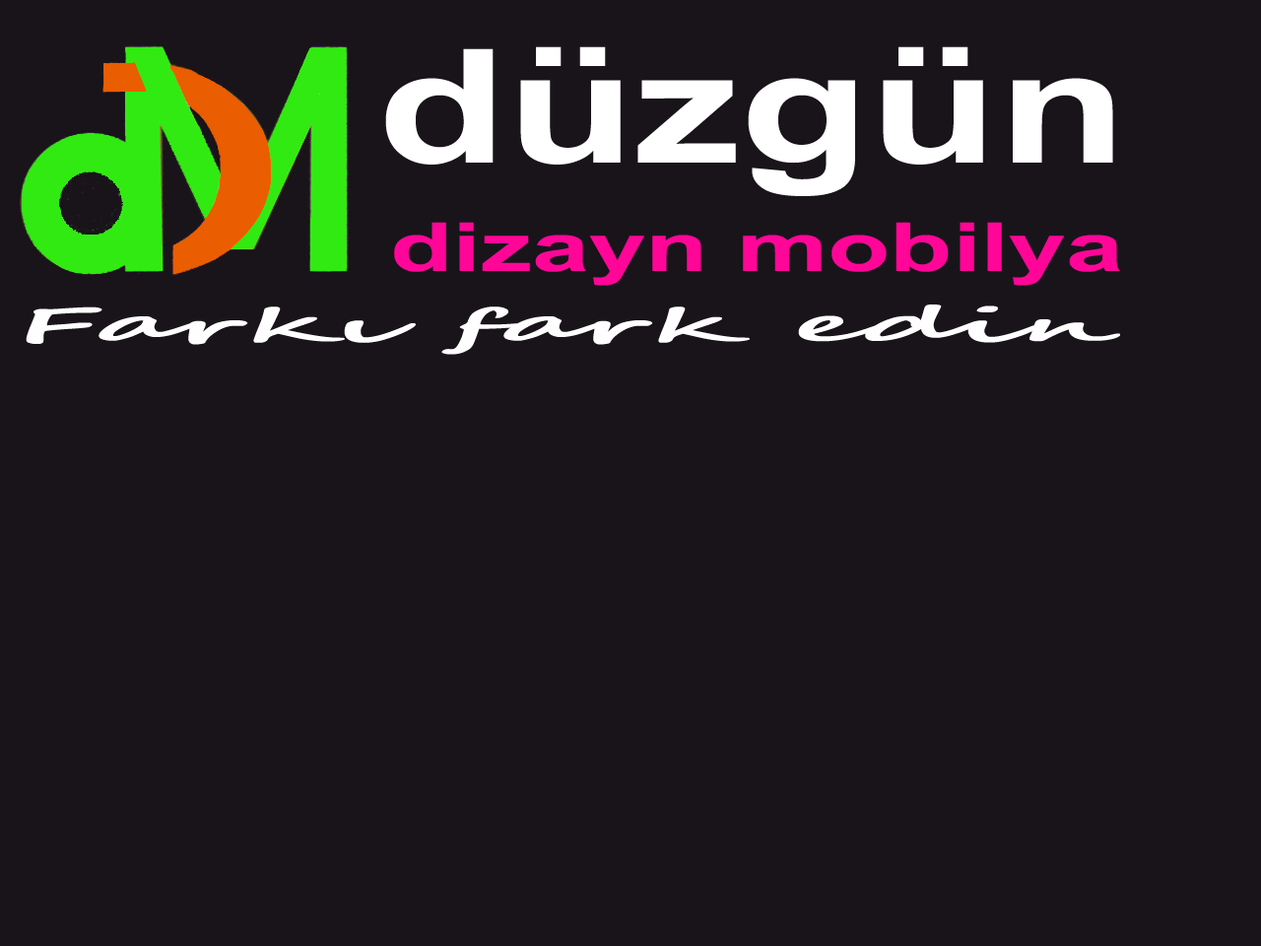
<style>
.page{position:relative;width:1261px;height:946px;background:#19141a}
.page>*{position:absolute;margin:0}
.t1{font:221.5px "Utsaah-Bold";color:#ffffff;scale:1.33 1}
.t2{font:94.6px "Utsaah-Bold";color:#ff0698;scale:1.51 1}
.t3{font:47.3px "SegoeScript-Bold";color:#fefefe;scale:2.86 1}
</style>
<div class="page">
<p class="t1" style="left:385px;top:46px;width:728px;height:150px">düzgün</p>
<p class="t2" style="left:394px;top:222px;width:726px;height:64px">dizayn mobilya</p>
<p class="t3" style="left:26px;top:304px;width:1094px;height:51px">Farkı fark edin</p>
</div>
